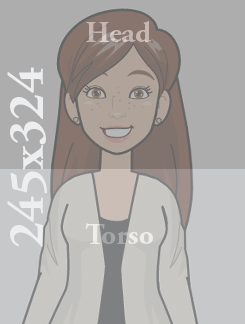
<style>
.page{position:relative;width:245px;height:324px;background:#adadad}
.page>*{position:absolute;margin:0}
.t1{font:30px "AGaramondPro-Bold";color:#c6b6b1}
.t2{font:50.6px "AGaramondPro-Bold";color:#f2f4f8}
.t3{font:30px "AGaramondPro-Bold";color:#f2f4f8}
</style>
<div class="page">
<p class="t1" style="left:86px;top:21px;width:66px;height:22px">Head</p>
<p class="t2" style="left:7px;top:67px;width:40px;height:180px;rotate:-90deg">245x324</p>
<p class="t3" style="left:85px;top:223px;width:68px;height:21px">Torso</p>
</div>
